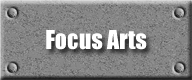
<style>
.page{position:relative;width:192px;height:80px}
.page>*{position:absolute;margin:0}
.t1{font:24px "Impact";color:#ffffff}
</style>
<div class="page">
<p class="t1" style="left:46px;top:30px;width:101px;height:20px">Focus Arts</p>
</div>
